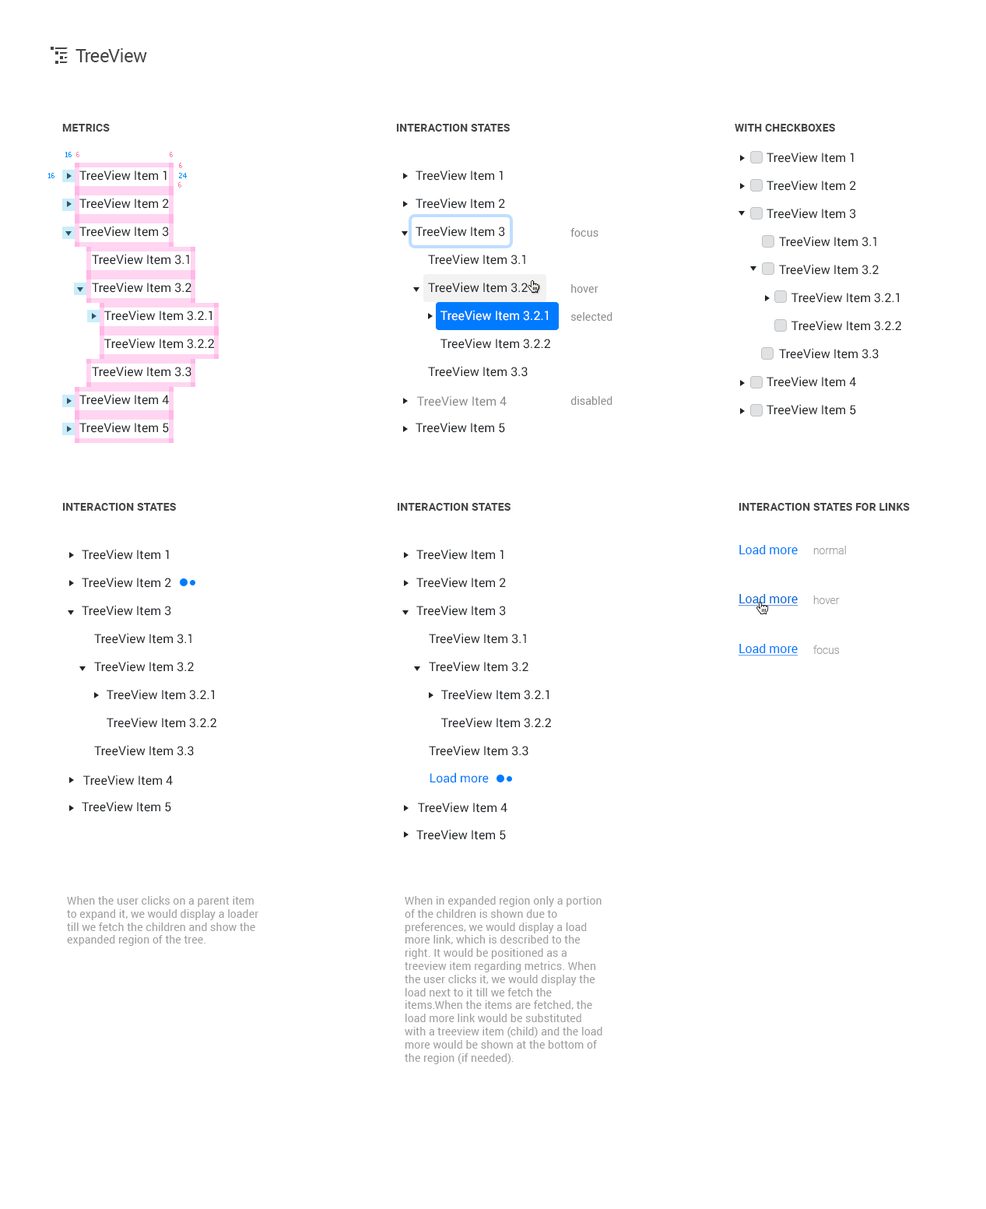
<style>
.page{position:relative;width:986px;height:1209px;background:#ffffff}
.page>*{position:absolute;margin:0}
.t1{font:18.7px "Roboto-Regular";letter-spacing:-0.025em;color:#454545}
.t2{font:10.9px "Roboto-Bold";letter-spacing:0.01em;color:#454545;text-transform:uppercase}
.t3{font:7px "Tahoma";color:#008aff}
.t4{font:7px "Tahoma";color:#ff7cae}
.t5{font:12.5px/28px "Roboto-Regular";color:#212529}
.t6{font:12.5px/28px "Roboto-Regular";color:#ffffff}
.t7{font:10.9px/28px "Roboto-Regular";letter-spacing:0.01em;color:#8c8c8c}
.t8{font:12.5px "Roboto-Regular";color:#898a8c}
.t9{font:12.5px "Roboto-Regular";color:#007bff}
.t10{font:10.9px/49.8px "Roboto-Light";color:#a1a1a1}
.t11{font:12.5px "Roboto-Regular";color:#0168d7;text-decoration:underline}
.t12{font:12.5px "Roboto-Regular";color:#007bff;text-decoration:underline}
.t13{font:12.5px "Roboto-Regular";color:#212529}
.t14{font:10.9px "Roboto-Regular";letter-spacing:0.01em;color:#9e9e9e}
</style>
<div class="page">
<p class="t1" style="left:76px;top:48px;width:71px;height:14px">TreeView</p>
<p class="t2" style="left:62px;top:124px;width:48px;height:8px">Metrics</p>
<p class="t2" style="left:396px;top:124px;width:114px;height:8px">Interaction states</p>
<p class="t2" style="left:735px;top:124px;width:100px;height:8px">with checkboxes</p>
<p class="t3" style="left:65px;top:152px;width:7px;height:5px">16</p>
<p class="t4" style="left:76px;top:152px;width:3px;height:5px">6</p>
<p class="t4" style="left:170px;top:152px;width:3px;height:5px">6</p>
<p class="t5" style="left:767px;top:152px;width:134px;height:263px">TreeView Item 1<br>TreeView Item 2<br>TreeView Item 3<br>    TreeView Item 3.1<br>    TreeView Item 3.2<br>        TreeView Item 3.2.1<br>        TreeView Item 3.2.2<br>    TreeView Item 3.3<br>TreeView Item 4<br>TreeView Item 5</p>
<p class="t3" style="left:48px;top:173px;width:6px;height:5px">16</p>
<p class="t5" style="left:79px;top:170px;width:135px;height:263px">TreeView Item 1<br>TreeView Item 2<br>TreeView Item 3<br>    TreeView Item 3.1<br>    TreeView Item 3.2<br>        TreeView Item 3.2.1<br>        TreeView Item 3.2.2<br>    TreeView Item 3.3<br>TreeView Item 4<br>TreeView Item 5</p>
<p class="t4" style="left:179px;top:163px;width:3px;height:5px">6</p>
<p class="t3" style="left:179px;top:173px;width:8px;height:5px">24</p>
<p class="t5" style="left:416px;top:170px;width:134px;height:263px">TreeView Item 1<br>TreeView Item 2<br>TreeView Item 3<br>    TreeView Item 3.1<br>    TreeView Item 3.2<br>        <span class="t6">TreeView Item 3.2.1<br></span>        TreeView Item 3.2.2<br>    TreeView Item 3.3<br><br>TreeView Item 5</p>
<p class="t4" style="left:178px;top:182px;width:3px;height:6px">6</p>
<p class="t7" style="left:571px;top:228px;width:42px;height:177px">focus<br><br>hover<br>selected<br><br><br>disabled</p>
<p class="t8" style="left:417px;top:395px;width:90px;height:11px">TreeView Item 4</p>
<p class="t2" style="left:62px;top:503px;width:114px;height:8px">Interaction states</p>
<p class="t2" style="left:397px;top:503px;width:114px;height:8px">Interaction states</p>
<p class="t2" style="left:739px;top:503px;width:171px;height:8px">interaction states for links</p>
<p class="t9" style="left:740px;top:545px;width:58px;height:9px">Load more</p>
<p class="t10" style="left:814px;top:546px;width:32px;height:108px">normal<br>hover<br>focus</p>
<p class="t5" style="left:82px;top:549px;width:134px;height:263px">TreeView Item 1<br>TreeView Item 2<br>TreeView Item 3<br>    TreeView Item 3.1<br>    TreeView Item 3.2<br>        TreeView Item 3.2.1<br>        TreeView Item 3.2.2<br>    TreeView Item 3.3<br><br>TreeView Item 5</p>
<p class="t5" style="left:416px;top:549px;width:135px;height:291px">TreeView Item 1<br>TreeView Item 2<br>TreeView Item 3<br>    TreeView Item 3.1<br>    TreeView Item 3.2<br>        TreeView Item 3.2.1<br>        TreeView Item 3.2.2<br>    TreeView Item 3.3<br><br><br>TreeView Item 5</p>
<p class="t11" style="left:739px;top:594px;width:60px;height:12px">Load more</p>
<p class="t12" style="left:739px;top:644px;width:60px;height:12px">Load more</p>
<p class="t9" style="left:430px;top:772px;width:59px;height:11px">Load more</p>
<p class="t13" style="left:83px;top:775px;width:90px;height:10px">TreeView Item 4</p>
<p class="t13" style="left:418px;top:802px;width:90px;height:11px">TreeView Item 4</p>
<p class="t14" style="left:67px;top:896px;width:191px;height:50px">When the user clicks on a parent item to expand it, we would display a loader till we fetch the children and show the expanded region of the tree.</p>
<p class="t14" style="left:405px;top:896px;width:198px;height:168px">When in expanded region only a portion of the children is shown due to preferences, we would display a load more link, which is described to the right. It would be positioned as a treeview item regarding metrics. When the user clicks it, we would display the load next to it till we fetch the items.When the items are fetched, the load more link would be substituted with a treeview item (child) and the load more would be shown at the bottom of the region (if needed).</p>
</div>
